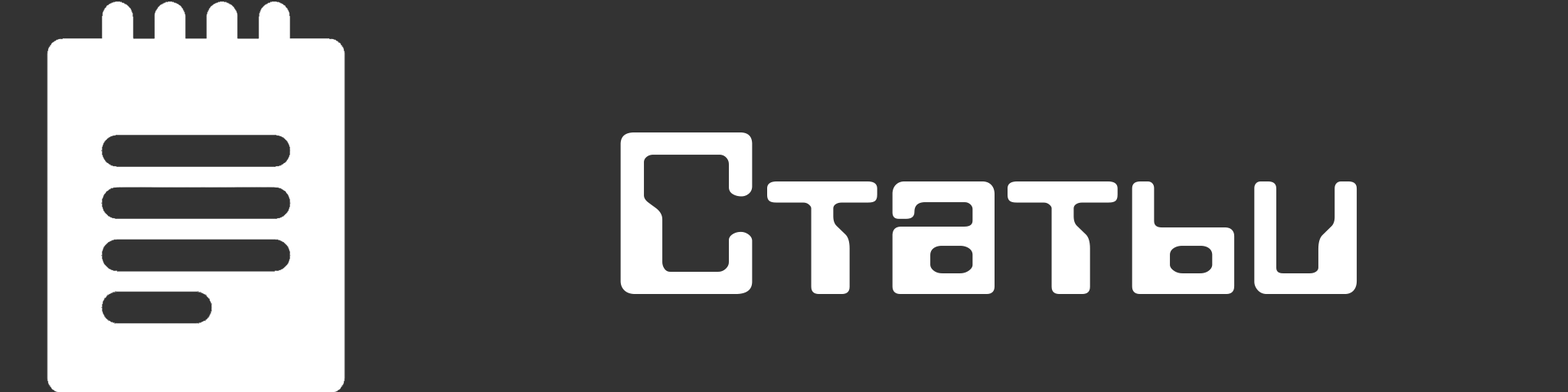
<style>
.page{position:relative;width:1568px;height:392px;background:#333333}
.page>*{position:absolute;margin:0}
.t1{font:255.2px "Techno28Normal";color:#ffffff}
</style>
<div class="page">
<p class="t1" style="left:620px;top:132px;width:737px;height:162px">Статьи</p>
</div>
